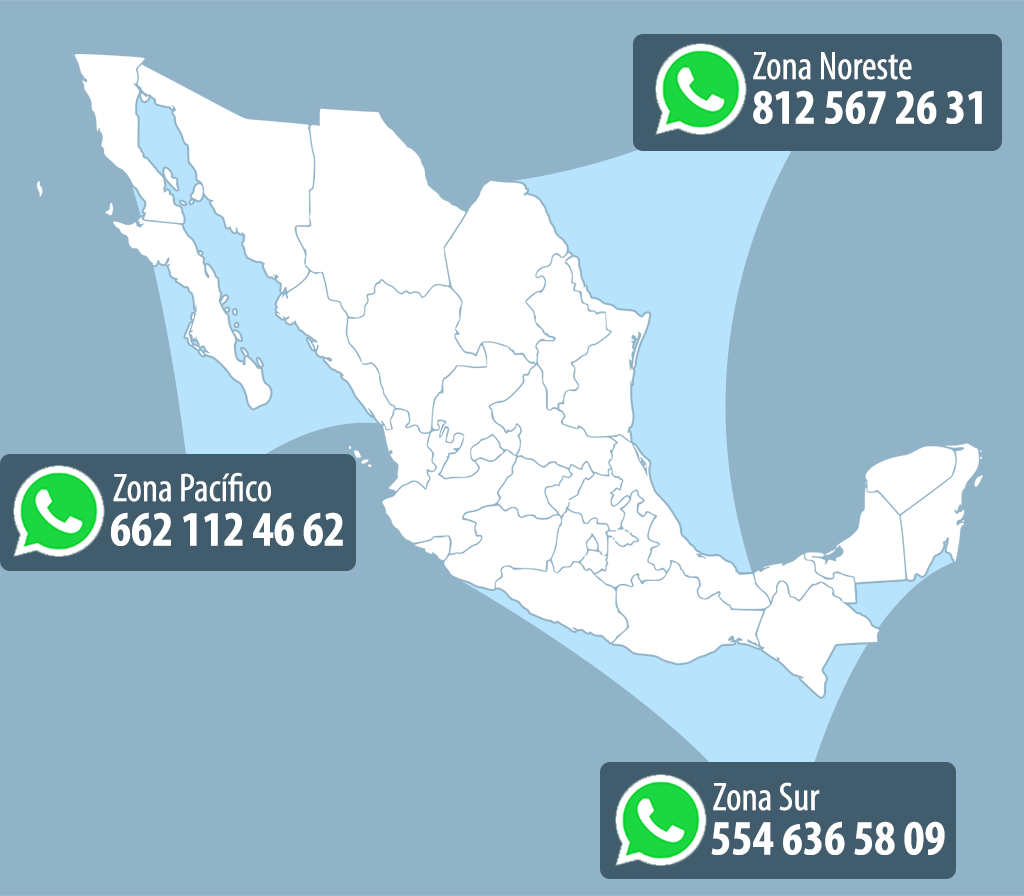
<style>
.page{position:relative;width:1024px;height:896px;background:#91b3c7}
.page>*{position:absolute;margin:0}
.t1{font:40.1px "MyriadPro-Cond";color:#ffffff}
.t2{font:49.6px "MyriadPro-BoldCond";color:#ffffff}
</style>
<div class="page">
<p class="t1" style="left:753px;top:52px;width:159px;height:28px">Zona Noreste</p>
<p class="t2" style="left:753px;top:90px;width:229px;height:34px">812 567 26 31</p>
<p class="t1" style="left:113px;top:472px;width:158px;height:30px">Zona Pacífico</p>
<p class="t2" style="left:111px;top:512px;width:232px;height:34px">662 112 46 62</p>
<p class="t1" style="left:713px;top:782px;width:107px;height:29px">Zona Sur</p>
<p class="t2" style="left:711px;top:821px;width:234px;height:34px">554 636 58 09</p>
</div>
